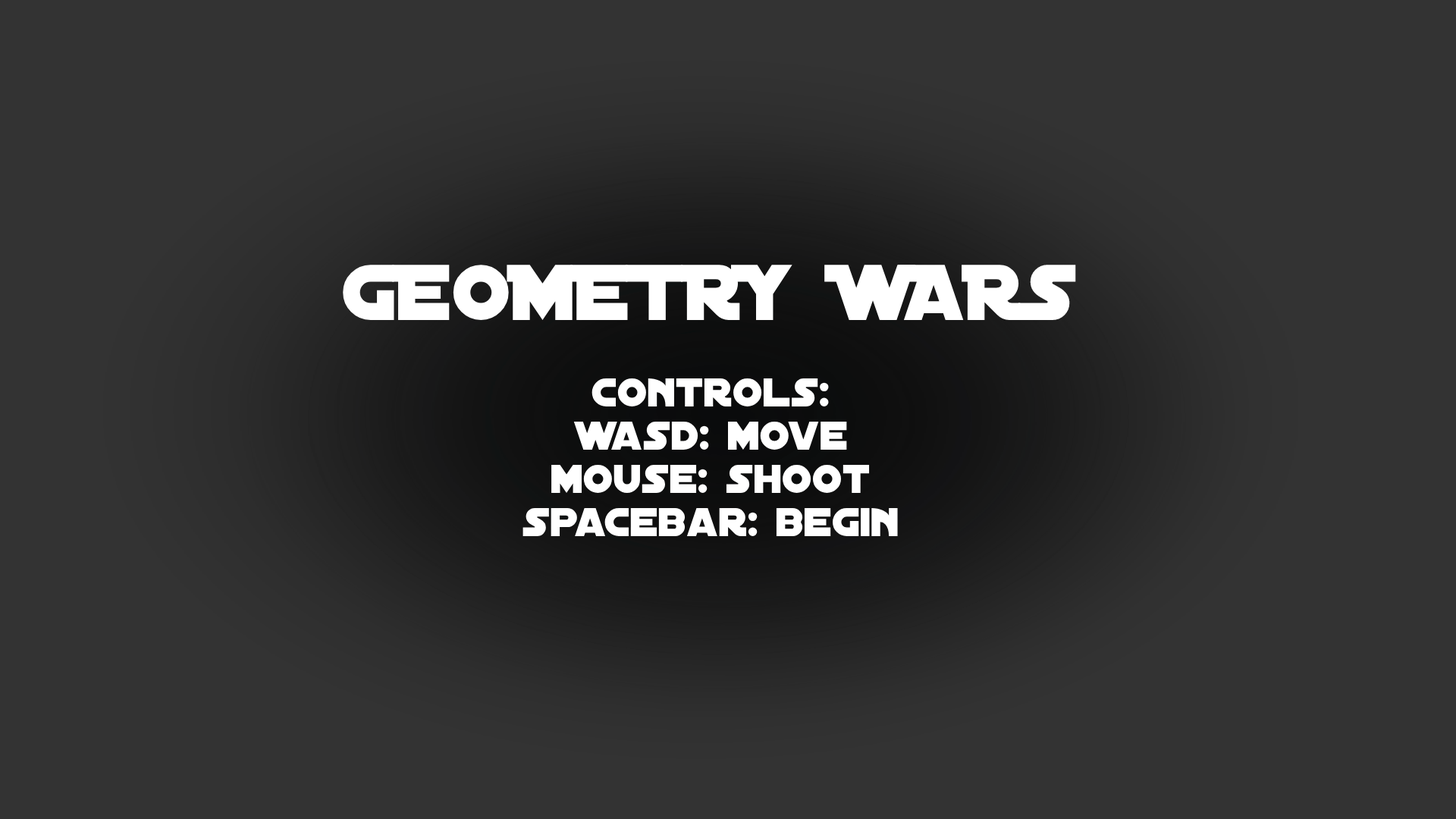
<style>
.page{position:relative;width:1456px;height:819px;background:#333333}
.page>*{position:absolute;margin:0}
.t1{font:43.2px "DistantGalaxy";color:#ffffff}
.t2{font:84.9px "DistantGalaxy";color:#ffffff}
</style>
<div class="page">
<p class="t1" style="left:343px;top:265px;width:733px;height:271px;text-align:center"><span class="t2">GEOMETRY WARS<br><br></span>Controls:<br>wasd: move<br>mouse: shoot<br>spacebar: begin</p>
</div>
